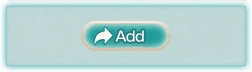
<style>
.page{position:relative;width:252px;height:72px}
.page>*{position:absolute;margin:0}
.t1{font:14px "GothicMB101Pro-Medium";letter-spacing:-0.04em;color:#fff5ef}
</style>
<div class="page">
<p class="t1" style="left:115px;top:30px;width:29px;height:12px">Add</p>
</div>
